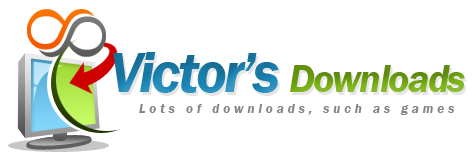
<style>
.page{position:relative;width:476px;height:161px;background:#ffffff}
.page>*{position:absolute;margin:0}
.t1{font:40.4px "FranklinGothic-DemiItalic";letter-spacing:-0.05em;color:#78b012}
.t2{font:57.8px "FranklinGothic-DemiItalic";letter-spacing:-0.05em;color:#1c88b9}
.t3{font:12.9px "FranklinGothic-DemiItalic";letter-spacing:0.308em;color:#848484}
</style>
<div class="page">
<p class="t1" style="left:113px;top:52px;width:352px;height:41px"><span class="t2">Victor’s </span>Downloads</p>
<p class="t3" style="left:139px;top:104px;width:315px;height:11px">Lots of downloads, such as games</p>
</div>
